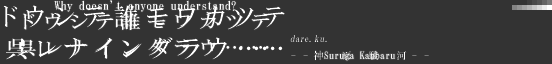
<style>
.page{position:relative;width:552px;height:64px;background:#333333}
.page>*{position:absolute;margin:0}
.t1{font:12px/18px "HGMinchoB";letter-spacing:0.01em;color:#ffffff}
.t2{font:18px/18px "HGMinchoB";letter-spacing:0.3em;color:#ffffff;scale:1.11 1}
.t3{font:18px/26px "HGMinchoB";letter-spacing:0.3em;color:#ffffff;scale:1.11 1}
.t4{font:10px "HGMinchoB";letter-spacing:0.01em;color:#ffffff}
</style>
<div class="page">
<p class="t1" style="left:17px;top:0px;width:253px;height:56px;text-align:center">Why doesn’t anyone understand?  <br><span class="t2">ドウシテ誰モワカツテ <br></span><span class="t3">呉レナインダラウ……</span></p>
<p class="t4" style="left:324px;top:51px;width:71px;height:10px">Suruga Kanbaru</p>
</div>
